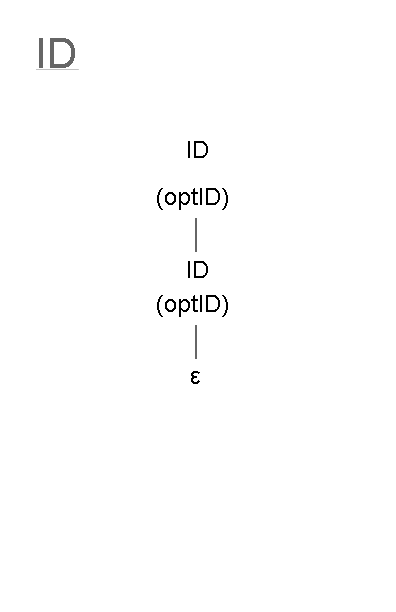
<style>
.page{position:relative;width:396px;height:612px;background:#ffffff}
.page>*{position:absolute;margin:0}
.t1{font:42px "ArialMT";color:#666666}
.t2{font:12px "ArialMT";color:#000000}
</style>
<div class="page">
<p class="t1" style="left:39px;top:38px;width:36px;height:30px">ID</p>
<p class="t2" style="left:188px;top:141px;width:20px;height:17px">ID</p>
<p class="t2" style="left:157px;top:188px;width:71px;height:22px">(optID)</p>
<p class="t2" style="left:188px;top:261px;width:20px;height:17px">ID</p>
<p class="t2" style="left:157px;top:295px;width:71px;height:22px">(optID)</p>
<p class="t2" style="left:191px;top:371px;width:9px;height:13px">ε</p>
</div>
